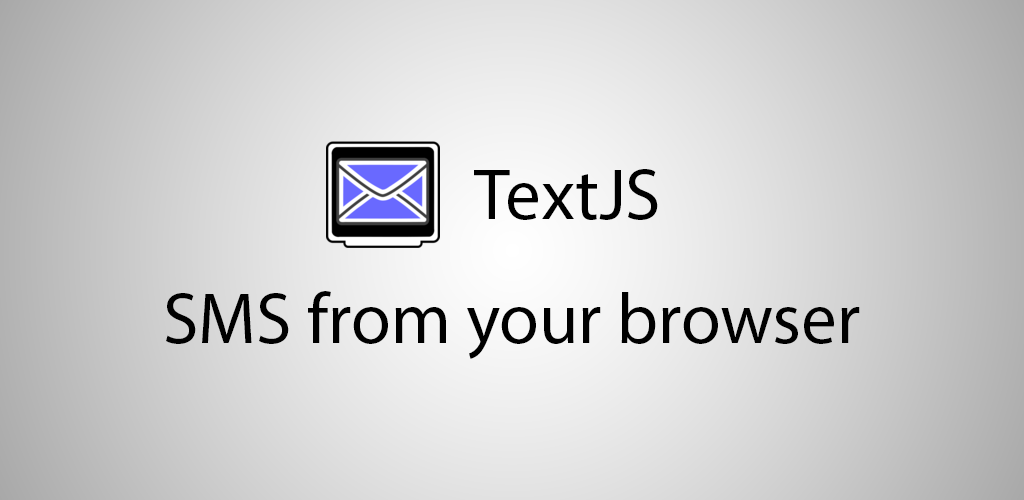
<style>
.page{position:relative;width:1024px;height:500px}
.page>*{position:absolute;margin:0}
.t1{font:72px "MyriadPro-Regular";color:#000000}
</style>
<div class="page">
<p class="t1" style="left:474px;top:169px;width:184px;height:51px">TextJS</p>
<p class="t1" style="left:166px;top:291px;width:694px;height:68px">SMS from your browser</p>
</div>
